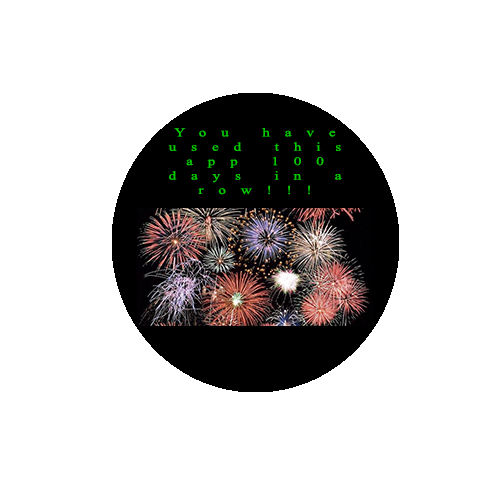
<style>
.page{position:relative;width:500px;height:500px;background:#ffffff}
.page>*{position:absolute;margin:0}
.t1{font:12px "TimesNewRomanPSMT";letter-spacing:0.985em;color:#05cd00;scale:1.26 1}
</style>
<div class="page">
<p class="t1" style="left:168px;top:128px;width:174px;height:67px;text-align:center">You have used this app 100 days in a row!!!</p>
</div>
